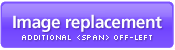
<style>
.page{position:relative;width:175px;height:50px}
.page>*{position:absolute;margin:0}
.t1{font:17.5px "Frutiger-Bold";letter-spacing:-0.025em;color:#ffffff}
.t2{font:8px "Silkscreen";letter-spacing:-0.025em;color:#ffffff}
</style>
<div class="page">
<p class="t1" style="left:13px;top:14px;width:149px;height:18px">Image replacement</p>
<p class="t2" style="left:22px;top:35px;width:130px;height:5px">additional &lt;span&gt; off-left</p>
</div>
